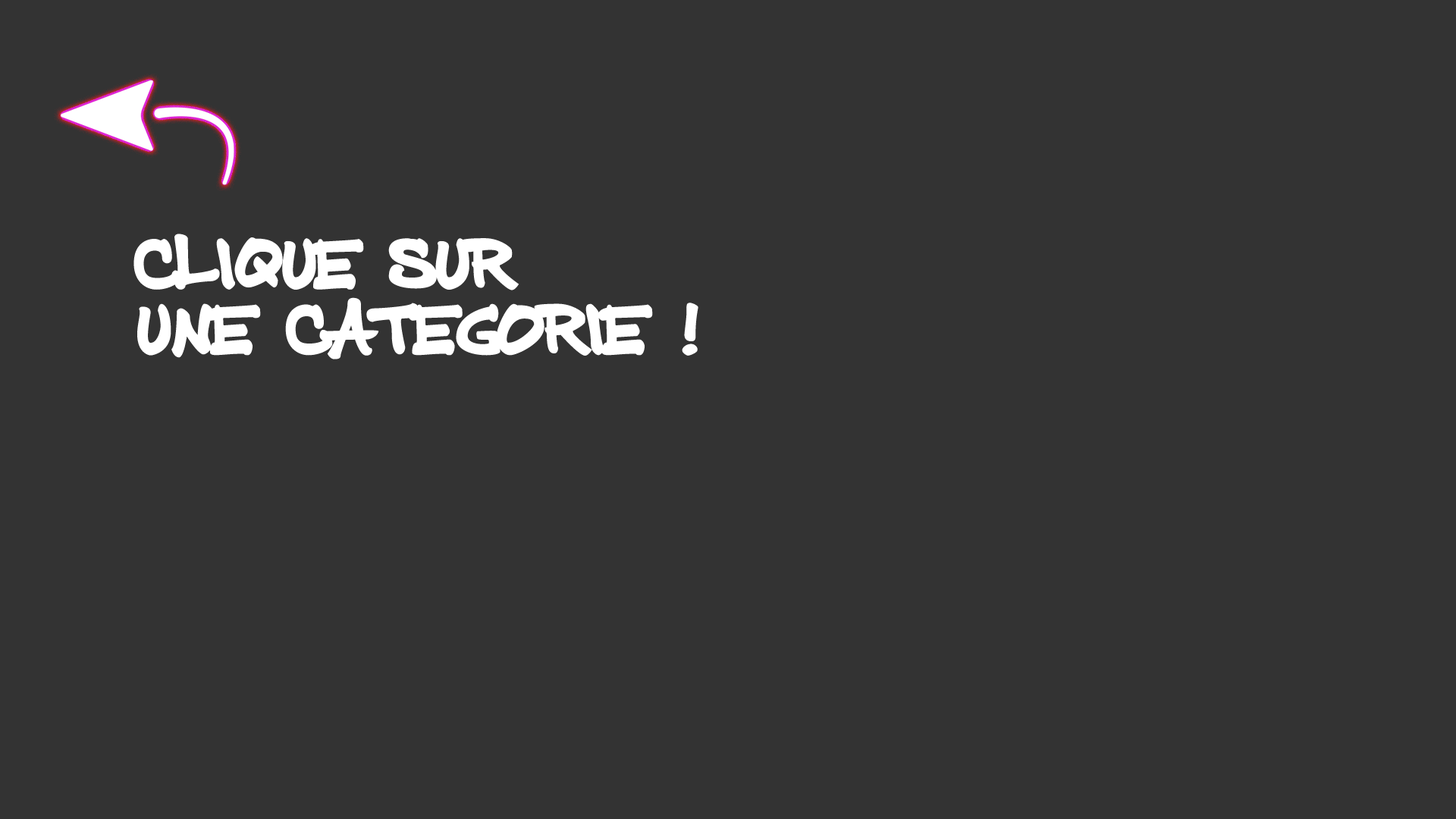
<style>
.page{position:relative;width:1456px;height:819px;background:#333333}
.page>*{position:absolute;margin:0}
.t1{font:54.6px "PrizmaFineRegular";color:#ffffff}
</style>
<div class="page">
<p class="t1" style="left:133px;top:234px;width:565px;height:125px">clique sur <br>une categorie !</p>
</div>
